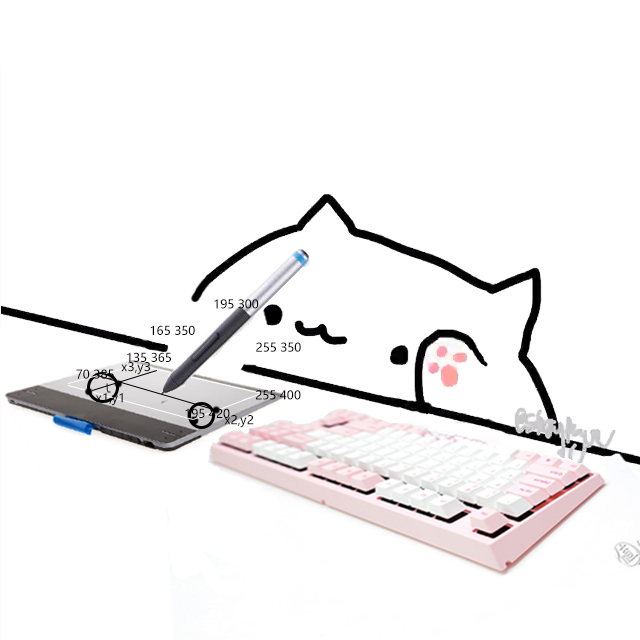
<style>
.page{position:relative;width:640px;height:640px;background:#ffffff}
.page>*{position:absolute;margin:0}
.t1{font:12px "MicrosoftYaHei";color:#000000}
</style>
<div class="page">
<p class="t1" style="left:214px;top:299px;width:45px;height:10px">195 300</p>
<p class="t1" style="left:150px;top:325px;width:45px;height:10px">165 350</p>
<p class="t1" style="left:256px;top:342px;width:45px;height:10px">255 350</p>
<p class="t1" style="left:127px;top:352px;width:44px;height:10px">135 365</p>
<p class="t1" style="left:121px;top:362px;width:29px;height:13px">x3,y3</p>
<p class="t1" style="left:76px;top:369px;width:38px;height:10px">70 385</p>
<p class="t1" style="left:256px;top:390px;width:45px;height:10px">255 400</p>
<p class="t1" style="left:96px;top:393px;width:27px;height:13px">x1,y1</p>
<p class="t1" style="left:185px;top:408px;width:45px;height:10px">195 420</p>
<p class="t1" style="left:224px;top:415px;width:30px;height:13px">x2,y2</p>
</div>
